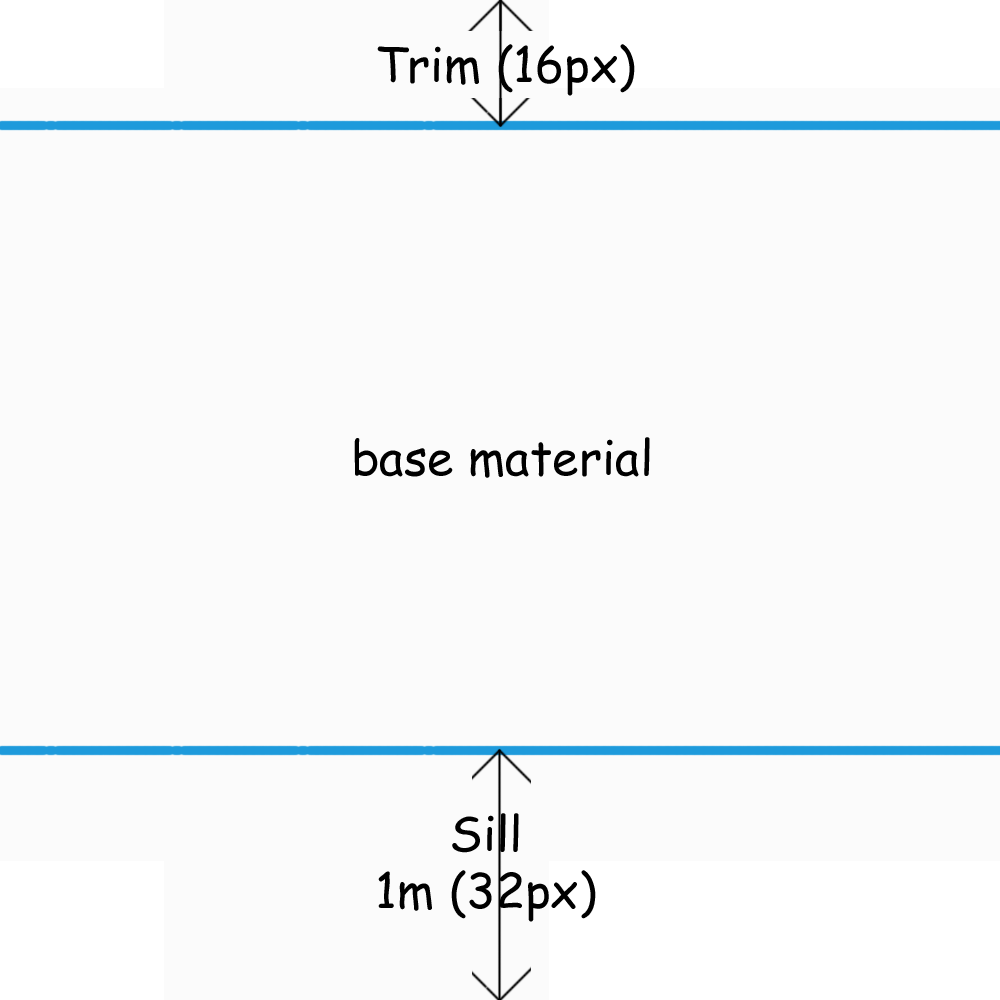
<style>
.page{position:relative;width:1000px;height:1000px;background:#fbfbfb}
.page>*{position:absolute;margin:0}
.t1{font:48px "ComicSansMS";color:#000000}
</style>
<div class="page">
<p class="t1" style="left:377px;top:44px;width:258px;height:52px">Trim (16px)</p>
<p class="t1" style="left:354px;top:437px;width:296px;height:41px">base material</p>
<p class="t1" style="left:378px;top:813px;width:218px;height:109px;text-align:center">Sill<br>1m (32px)</p>
</div>
